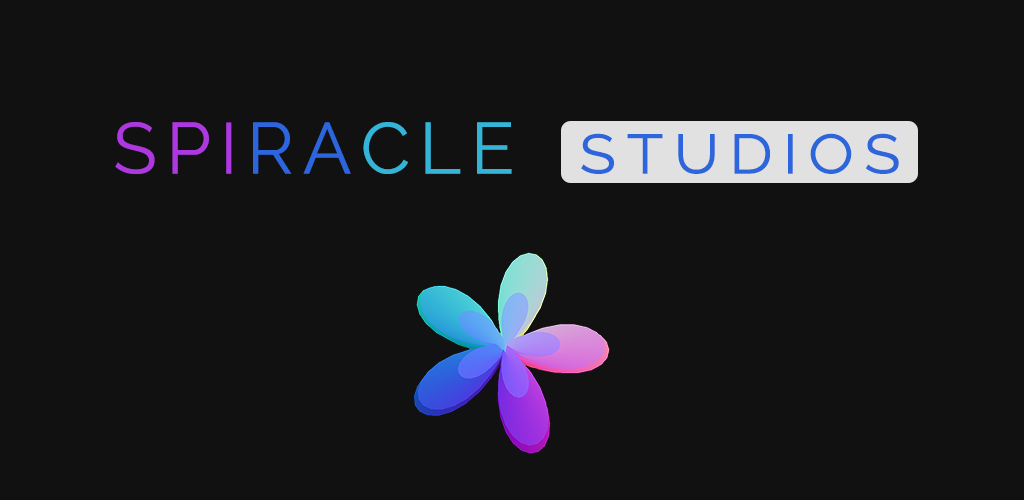
<style>
.page{position:relative;width:1024px;height:500px;background:#111111}
.page>*{position:absolute;margin:0}
.t1{font:72px "Raleway";letter-spacing:0.125em;color:#2c65dc;font-variant:small-caps}
.t2{font:72px "Raleway";letter-spacing:0.125em;color:#ad38df;text-transform:uppercase}
.t3{font:72px "Raleway";letter-spacing:0.125em;color:#2c65dc;text-transform:uppercase}
.t4{font:72px "Raleway";letter-spacing:0.125em;color:#34b5d7;text-transform:uppercase}
</style>
<div class="page">
<p class="t1" style="left:115px;top:122px;width:784px;height:52px"><span class="t2">Spi</span><span class="t3">ra</span><span class="t4">cle  </span>studios</p>
</div>
